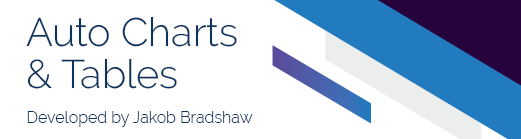
<style>
.page{position:relative;width:521px;height:139px;background:#ffffff}
.page>*{position:absolute;margin:0}
.t1{font:39.7px/42.3px "Raleway-Light";color:#0d345e}
.t2{font:16px "Raleway-Light";color:#0d345e}
</style>
<div class="page">
<p class="t1" style="left:26px;top:16px;width:211px;height:73px">Auto Charts<br>&amp; Tables</p>
<p class="t2" style="left:27px;top:111px;width:226px;height:16px">Developed by Jakob Bradshaw</p>
</div>
